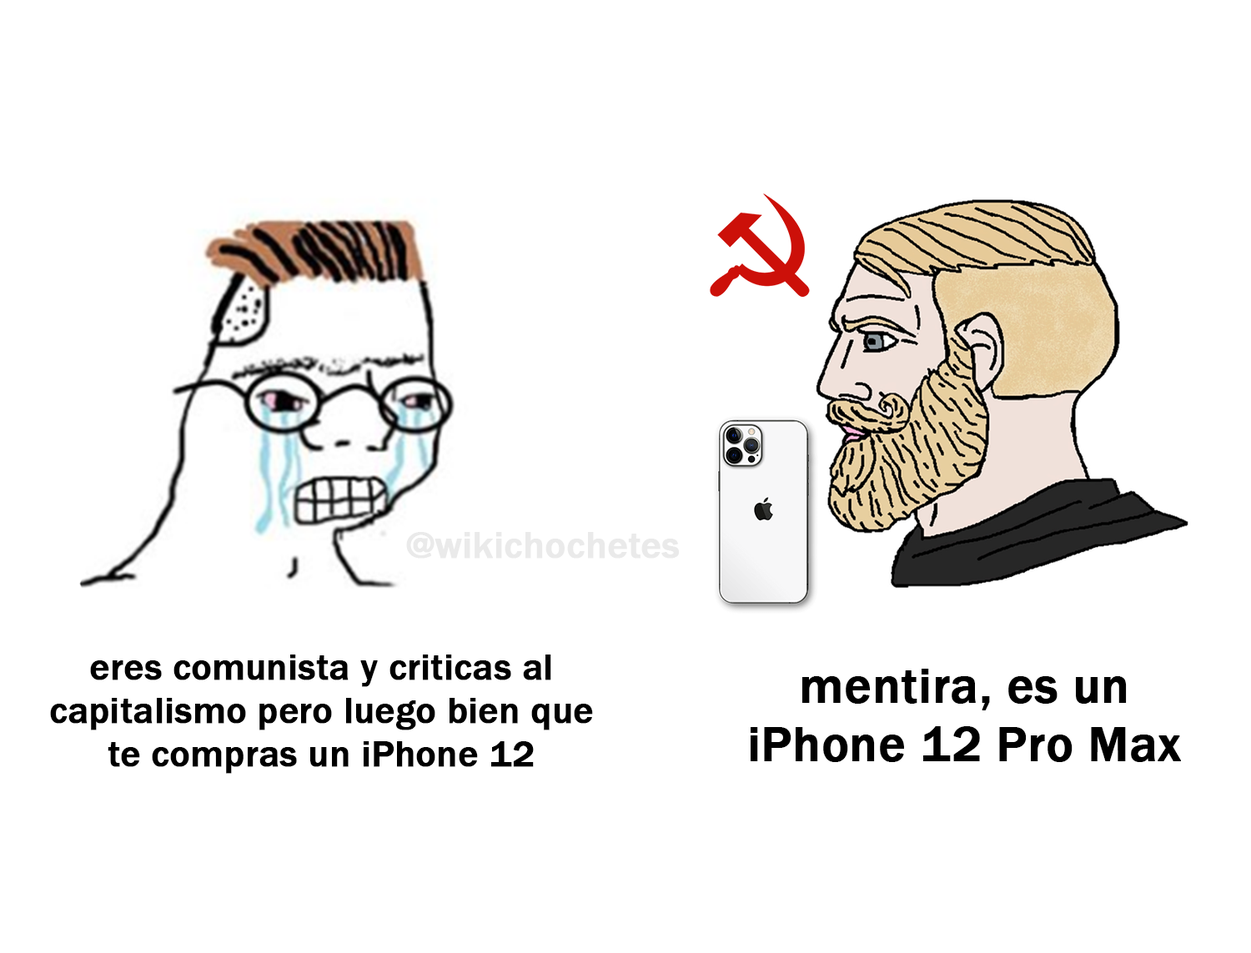
<style>
.page{position:relative;width:1251px;height:953px;background:#ffffff}
.page>*{position:absolute;margin:0}
.t1{font:38.2px "FranklinGothic-Medium";color:#eaeaea;font-weight:bold}
.t2{font:37.4px "FranklinGothic-Medium";color:#000000;font-weight:bold}
.t3{font:50.4px "FranklinGothic-Medium";color:#000000;font-weight:bold}
</style>
<div class="page">
<p class="t1" style="left:406px;top:532px;width:273px;height:27px">@wikichochetes</p>
<p class="t2" style="left:50px;top:655px;width:543px;height:119px;text-align:center">eres comunista y criticas al<br>capitalismo pero luego bien que<br>te compras un iPhone 12</p>
<p class="t3" style="left:751px;top:669px;width:430px;height:93px;text-align:center">mentira, es un<br>iPhone 12 Pro Max</p>
</div>
